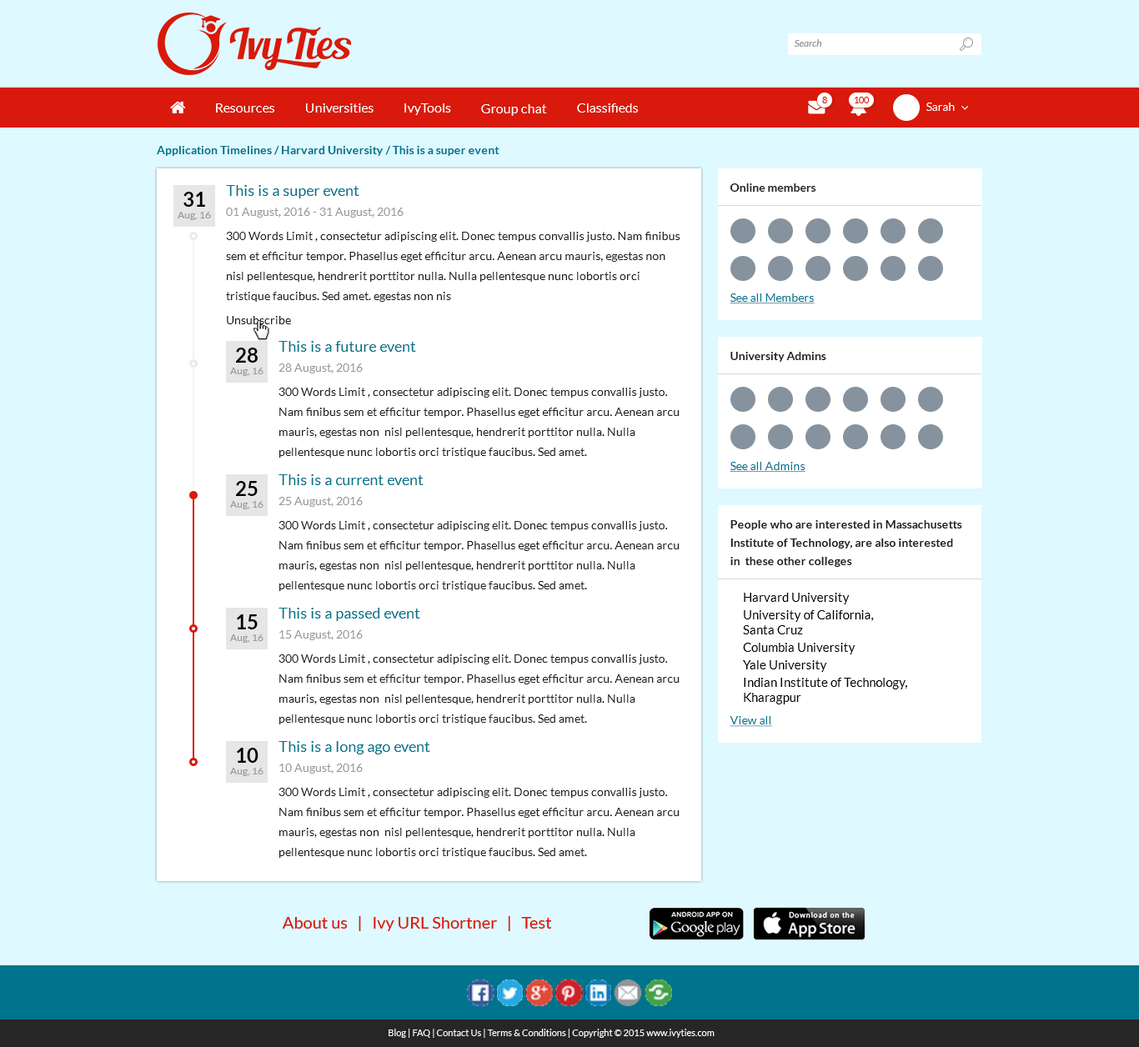
<style>
.page{position:relative;width:1139px;height:1047px;background:#def9ff}
.page>*{position:absolute;margin:0}
.t1{font:11.7px "Lato-Bold";color:#00748c}
.t2{font:15px "Lato-Regular";color:#00748c}
.t3{font:11.7px "Lato-Bold";color:#231f20}
.t4{font:10px "Lato-Regular";color:#999999}
.t5{font:20px "Lato-Bold";color:#000000}
.t6{font:11.7px "Lato-Regular";color:#999999}
.t7{font:11.7px/20px "Lato-Regular";color:#231f20}
.t8{font:11.7px "Lato-Regular";color:#00748c;text-decoration:underline}
.t9{font:11.7px "Lato-Regular";color:#231f20}
.t10{font:11.7px/18.3px "Lato-Bold";color:#231f20}
.t11{font:12.5px "Lato-Regular";color:#000000}
</style>
<div class="page">
<p class="t1" style="left:157px;top:146px;width:342px;height:10px">Application Timelines / Harvard University / This is a super event</p>
<p class="t2" style="left:226px;top:185px;width:133px;height:13px">This is a super event</p>
<p class="t3" style="left:729px;top:183px;width:87px;height:9px">Online members</p>
<p class="t4" style="left:178px;top:192px;width:33px;height:28px;text-align:center"><span class="t5">31<br></span>Aug, 16</p>
<p class="t6" style="left:226px;top:208px;width:177px;height:10px">01 August, 2016 - 31 August, 2016</p>
<p class="t7" style="left:226px;top:232px;width:454px;height:70px">300 Words Limit , consectetur adipiscing elit. Donec tempus convallis justo. Nam finibus sem et efficitur tempor. Phasellus eget efficitur arcu. Aenean arcu mauris, egestas non  nisl pellentesque, hendrerit porttitor nulla. Nulla pellentesque nunc lobortis orci tristique faucibus. Sed amet. egestas non nis</p>
<p class="t8" style="left:729px;top:293px;width:86px;height:10px">See all Members</p>
<p class="t9" style="left:227px;top:316px;width:64px;height:8px">Unsubscribe</p>
<p class="t2" style="left:278px;top:341px;width:138px;height:11px">This is a future event</p>
<p class="t4" style="left:230px;top:348px;width:33px;height:28px;text-align:center"><span class="t5">28<br></span>Aug, 16</p>
<p class="t3" style="left:730px;top:352px;width:96px;height:10px">University Admins</p>
<p class="t6" style="left:278px;top:363px;width:85px;height:10px">28 August, 2016</p>
<p class="t7" style="left:278px;top:388px;width:401px;height:70px">300 Words Limit , consectetur adipiscing elit. Donec tempus convallis justo. Nam finibus sem et efficitur tempor. Phasellus eget efficitur arcu. Aenean arcu mauris, egestas non  nisl pellentesque, hendrerit porttitor nulla. Nulla pellentesque nunc lobortis orci tristique faucibus. Sed amet.<br> egestas non nis</p>
<p class="t8" style="left:729px;top:462px;width:76px;height:10px">See all Admins</p>
<p class="t4" style="left:230px;top:481px;width:33px;height:28px;text-align:center"><span class="t5">25<br></span>Aug, 16</p>
<p class="t2" style="left:278px;top:474px;width:146px;height:11px">This is a current event</p>
<p class="t6" style="left:278px;top:497px;width:85px;height:10px">25 August, 2016</p>
<p class="t7" style="left:278px;top:521px;width:401px;height:70px">300 Words Limit , consectetur adipiscing elit. Donec tempus convallis justo. Nam finibus sem et efficitur tempor. Phasellus eget efficitur arcu. Aenean arcu mauris, egestas non  nisl pellentesque, hendrerit porttitor nulla. Nulla pellentesque nunc lobortis orci tristique faucibus. Sed amet.<br> egestas non nis</p>
<p class="t10" style="left:730px;top:520px;width:232px;height:47px">People who are interested in Massachusetts Institute of Technology, are also interested <br>in  these other colleges</p>
<p class="t11" style="left:743px;top:593px;width:164px;height:111px">Harvard University<br>University of California, <br>Santa Cruz<br>Columbia University<br>Yale University<br>Indian Institute of Technology, <br>Kharagpur</p>
<p class="t4" style="left:230px;top:614px;width:33px;height:29px;text-align:center"><span class="t5">15<br></span>Aug, 16</p>
<p class="t2" style="left:278px;top:608px;width:142px;height:13px">This is a passed event</p>
<p class="t6" style="left:279px;top:630px;width:84px;height:10px">15 August, 2016</p>
<p class="t7" style="left:278px;top:654px;width:401px;height:70px">300 Words Limit , consectetur adipiscing elit. Donec tempus convallis justo. Nam finibus sem et efficitur tempor. Phasellus eget efficitur arcu. Aenean arcu mauris, egestas non  nisl pellentesque, hendrerit porttitor nulla. Nulla pellentesque nunc lobortis orci tristique faucibus. Sed amet.<br> egestas non nis</p>
<p class="t8" style="left:729px;top:716px;width:43px;height:11px">View all</p>
<p class="t4" style="left:230px;top:748px;width:33px;height:28px;text-align:center"><span class="t5">10<br></span>Aug, 16</p>
<p class="t2" style="left:278px;top:741px;width:152px;height:13px">This is a long ago event</p>
<p class="t6" style="left:279px;top:764px;width:84px;height:10px">10 August, 2016</p>
<p class="t7" style="left:278px;top:788px;width:401px;height:70px">300 Words Limit , consectetur adipiscing elit. Donec tempus convallis justo. Nam finibus sem et efficitur tempor. Phasellus eget efficitur arcu. Aenean arcu mauris, egestas non  nisl pellentesque, hendrerit porttitor nulla. Nulla pellentesque nunc lobortis orci tristique faucibus. Sed amet.<br> egestas non nis</p>
</div>
